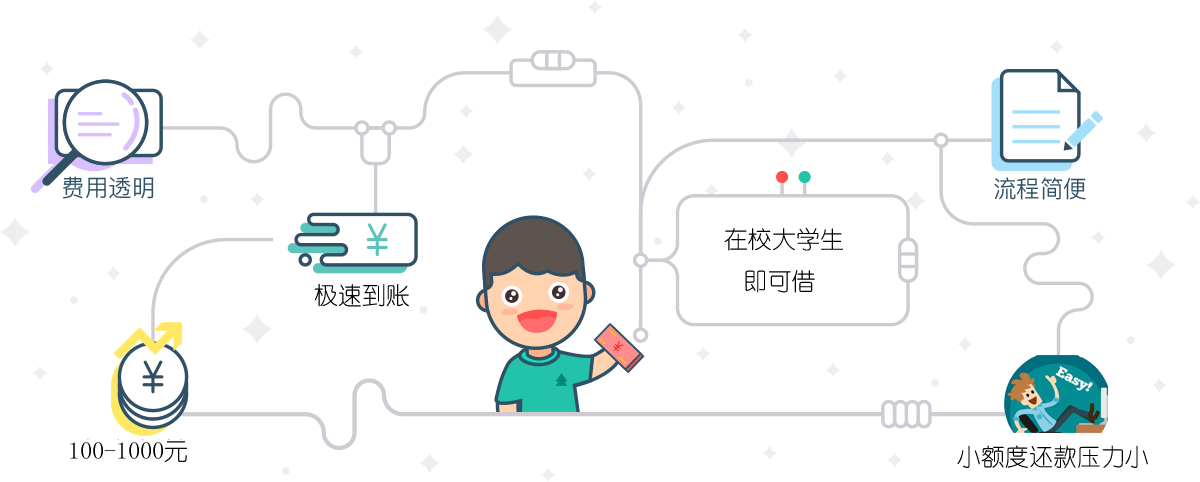
<style>
.page{position:relative;width:1200px;height:482px;background:#ffffff}
.page>*{position:absolute;margin:0}
.t1{font:24px "YouYuan";color:#000000}
.t2{font:24px "MicrosoftYaHei";color:#000000}
.t3{font:24px "YouYuan";color:#010101}
</style>
<div class="page">
<p class="t1" style="left:724px;top:227px;width:119px;height:66px"><span class="t2">    </span>在校大学生<br>    即可借</p>
<p class="t3" style="left:314px;top:283px;width:95px;height:24px">极速到账</p>
<p class="t1" style="left:70px;top:441px;width:117px;height:21px">100-1000元</p>
<p class="t1" style="left:957px;top:445px;width:191px;height:23px">小额度还款压力小</p>
</div>
